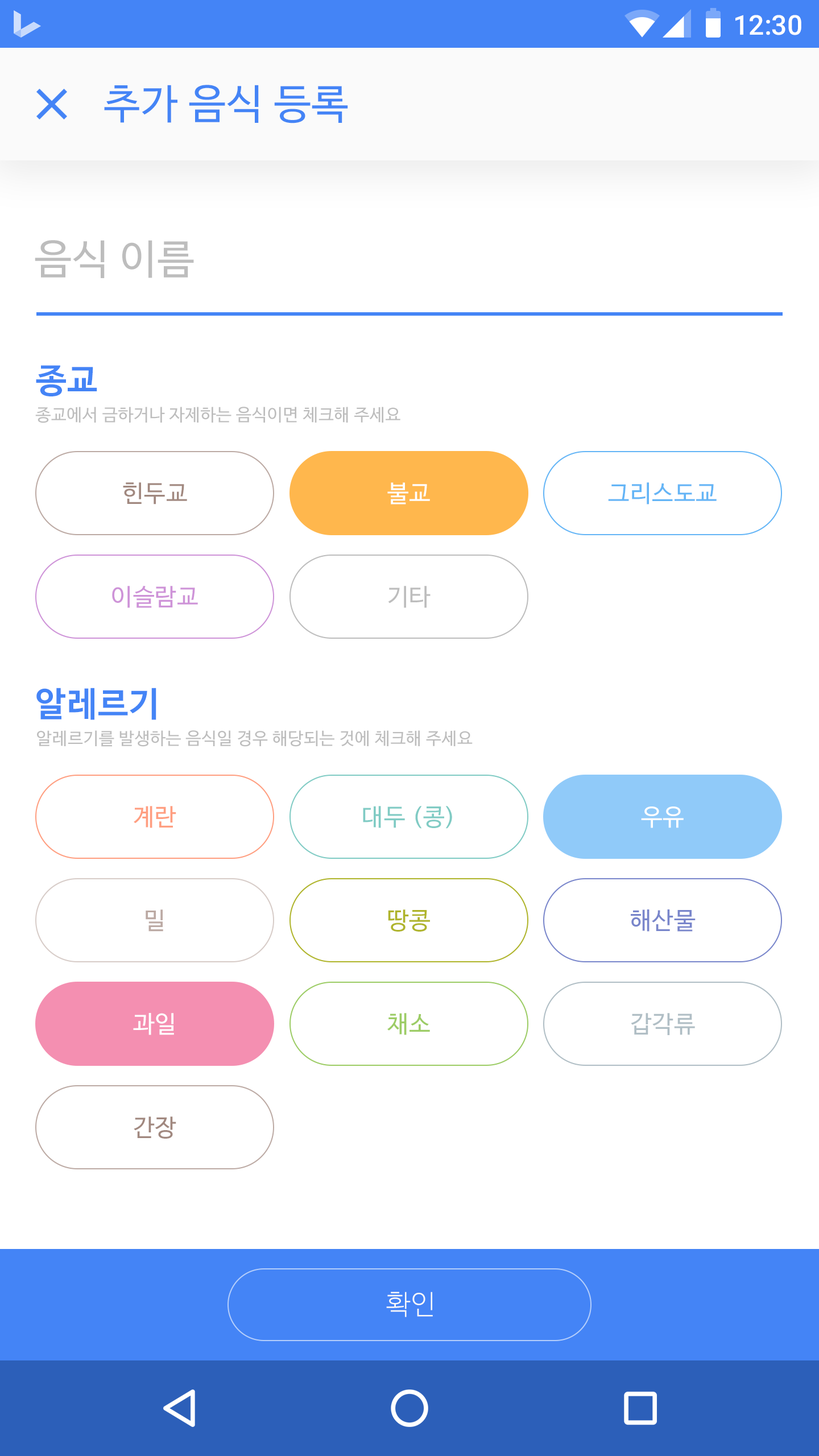
<style>
.page{position:relative;width:819px;height:1456px;background:#ffffff}
.page>*{position:absolute;margin:0}
.t1{font:27.3px "Roboto-Medium";color:#ffffff}
.t2{font:40.9px "NanumBarunGothic";letter-spacing:0.025em;color:#4484f6}
.t3{font:40.9px "NanumBarunGothic";letter-spacing:0.025em;color:#bdbdbd}
.t4{font:34.1px "NanumBarunGothicBold";letter-spacing:0.025em;color:#4484f6}
.t5{font:17.1px "NanumBarunGothic";letter-spacing:0.025em;color:#bdbdbd}
.t6{font:23.9px "NanumBarunGothic";letter-spacing:0.025em;color:#a1887f}
.t7{font:23.9px "NanumBarunGothic";letter-spacing:0.025em;color:#ffffff}
.t8{font:23.9px "NanumBarunGothic";letter-spacing:0.025em;color:#64b5f6}
.t9{font:23.9px "NanumBarunGothic";letter-spacing:0.025em;color:#ce93d8}
.t10{font:23.9px "NanumBarunGothic";letter-spacing:0.025em;color:#bdbdbd}
.t11{font:23.9px "NanumBarunGothic";letter-spacing:0.025em;color:#ff9e80}
.t12{font:23.9px "NanumBarunGothic";letter-spacing:0.025em;color:#80cbc4}
.t13{font:23.9px "NanumBarunGothic";letter-spacing:0.025em;color:#bcaaa4}
.t14{font:23.9px "NanumBarunGothic";letter-spacing:0.025em;color:#afb42b}
.t15{font:23.9px "NanumBarunGothic";letter-spacing:0.025em;color:#7986cb}
.t16{font:23.9px "NanumBarunGothic";letter-spacing:0.025em;color:#9ccc65}
.t17{font:23.9px "NanumBarunGothic";letter-spacing:0.025em;color:#b0bec5}
.t18{font:27.3px "NanumBarunGothicLight";letter-spacing:0.025em;color:#fafafa}
</style>
<div class="page">
<p class="t1" style="left:735px;top:15px;width:66px;height:20px">12:30</p>
<p class="t2" style="left:104px;top:85px;width:244px;height:38px">추가 음식 등록</p>
<p class="t3" style="left:35px;top:240px;width:159px;height:38px">음식 이름</p>
<p class="t4" style="left:36px;top:365px;width:61px;height:31px">종교</p>
<p class="t5" style="left:35px;top:407px;width:365px;height:16px">종교에서 금하거나 자제하는 음식이면 체크해 주세요</p>
<p class="t6" style="left:123px;top:482px;width:64px;height:22px">힌두교</p>
<p class="t7" style="left:387px;top:482px;width:43px;height:22px">불교</p>
<p class="t8" style="left:608px;top:482px;width:109px;height:22px">그리스도교</p>
<p class="t9" style="left:112px;top:586px;width:86px;height:22px">이슬람교</p>
<p class="t10" style="left:388px;top:586px;width:43px;height:22px">기타</p>
<p class="t4" style="left:36px;top:688px;width:120px;height:32px">알레르기</p>
<p class="t5" style="left:37px;top:730px;width:436px;height:17px">알레르기를 발생하는 음식일 경우 해당되는 것에 체크해 주세요</p>
<p class="t11" style="left:134px;top:806px;width:42px;height:22px">계란</p>
<p class="t12" style="left:363px;top:806px;width:89px;height:23px">대두 (콩)</p>
<p class="t7" style="left:641px;top:806px;width:43px;height:22px">우유</p>
<p class="t13" style="left:146px;top:909px;width:17px;height:23px">밀</p>
<p class="t14" style="left:388px;top:909px;width:42px;height:23px">땅콩</p>
<p class="t15" style="left:631px;top:909px;width:65px;height:23px">해산물</p>
<p class="t7" style="left:133px;top:1013px;width:41px;height:22px">과일</p>
<p class="t16" style="left:387px;top:1013px;width:43px;height:22px">채소</p>
<p class="t17" style="left:631px;top:1013px;width:64px;height:22px">갑각류</p>
<p class="t6" style="left:134px;top:1116px;width:42px;height:23px">간장</p>
<p class="t18" style="left:386px;top:1292px;width:47px;height:25px">확인</p>
</div>
